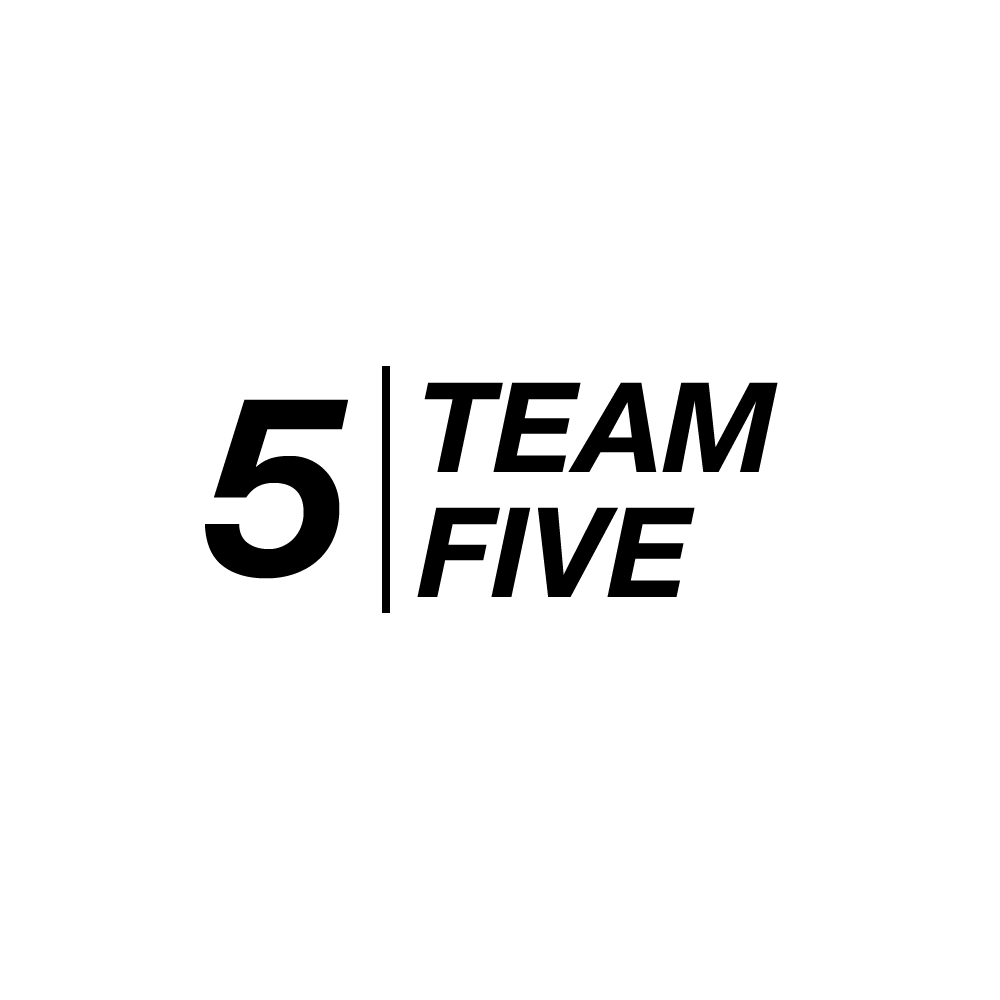
<style>
.page{position:relative;width:1000px;height:1000px;background:#ffffff}
.page>*{position:absolute;margin:0}
.t1{font:125px/125px "HelveticaNeue-BoldItalic";color:#000000}
.t2{font:250px "HelveticaNeue-BoldItalic";color:#000000}
</style>
<div class="page">
<p class="t1" style="left:417px;top:382px;width:361px;height:215px">TEAM<br>FIVE</p>
<p class="t2" style="left:205px;top:399px;width:143px;height:180px">5</p>
</div>
